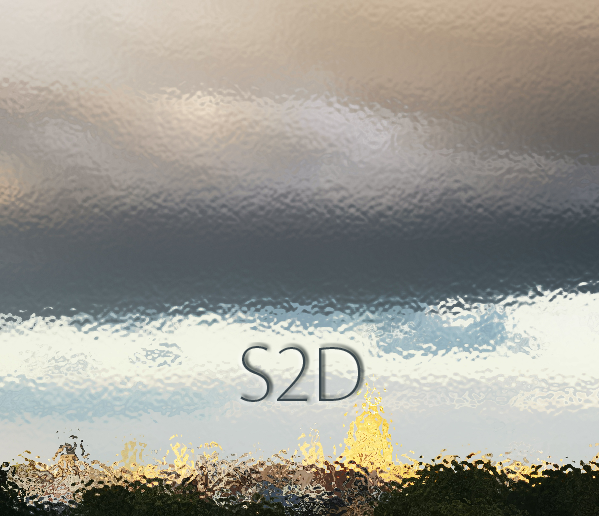
<style>
.page{position:relative;width:599px;height:516px}
.page>*{position:absolute;margin:0}
.t1{font:72px "KozGoPr6N-ExtraLight";color:#38454b}
</style>
<div class="page">
<p class="t1" style="left:240px;top:346px;width:121px;height:56px">S2D</p>
</div>
